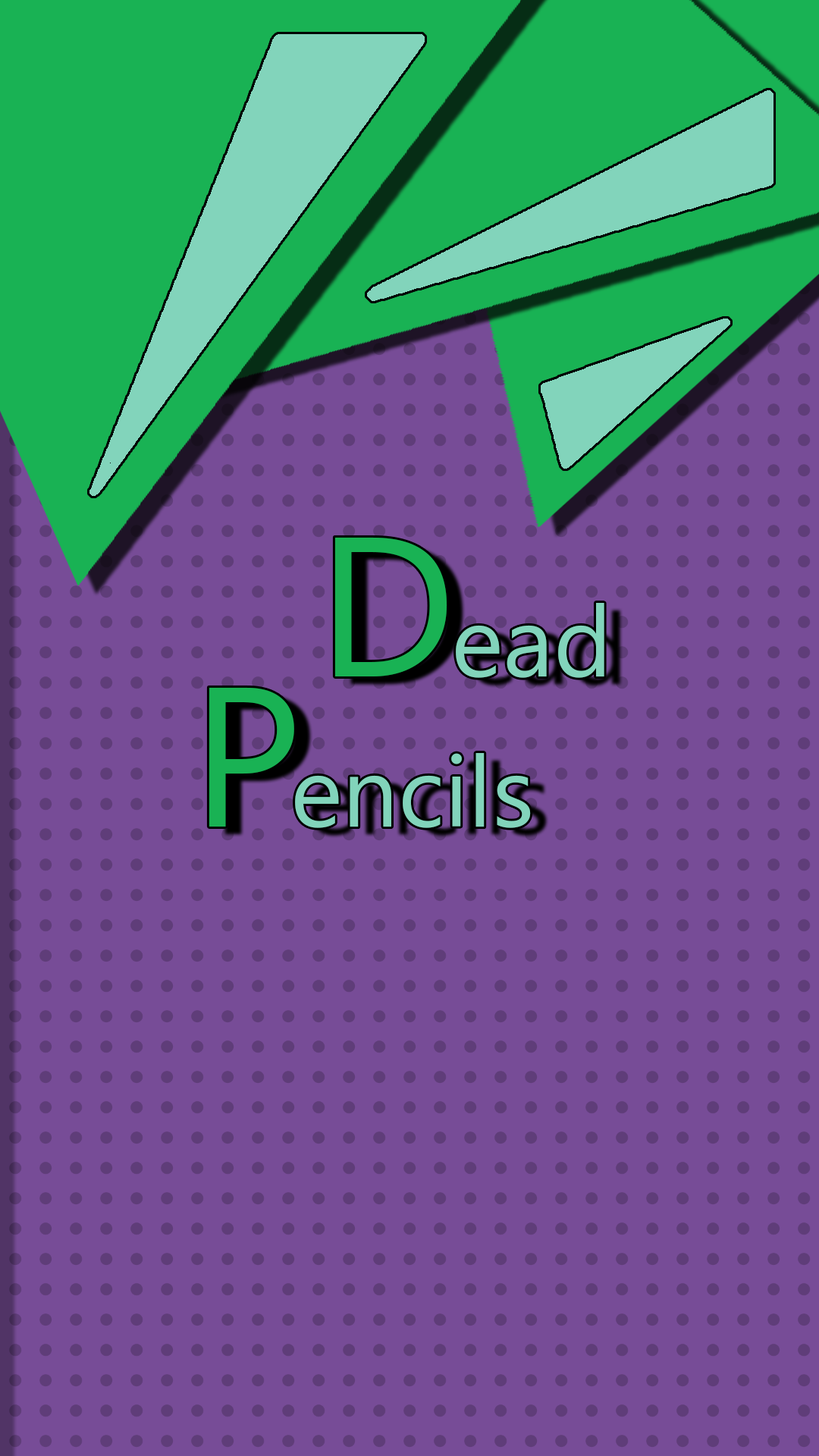
<style>
.page{position:relative;width:819px;height:1456px;background:#774c97}
.page>*{position:absolute;margin:0}
.t1{font:198.8px "Gadugi";color:#19b254}
.t2{font:99.4px "Gadugi";color:#82d4bb}
</style>
<div class="page">
<p class="t1" style="left:334px;top:537px;width:113px;height:139px">D</p>
<p class="t2" style="left:456px;top:603px;width:148px;height:75px">ead</p>
<p class="t1" style="left:209px;top:687px;width:85px;height:140px">P</p>
<p class="t2" style="left:295px;top:753px;width:236px;height:75px">encils</p>
</div>
